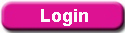
<style>
.page{position:relative;width:125px;height:33px;background:#dd1292}
.page>*{position:absolute;margin:0}
.t1{font:18px "Arial-BoldMT";color:#fcf9fb}
</style>
<div class="page">
<p class="t1" style="left:41px;top:9px;width:47px;height:17px">Login</p>
</div>
